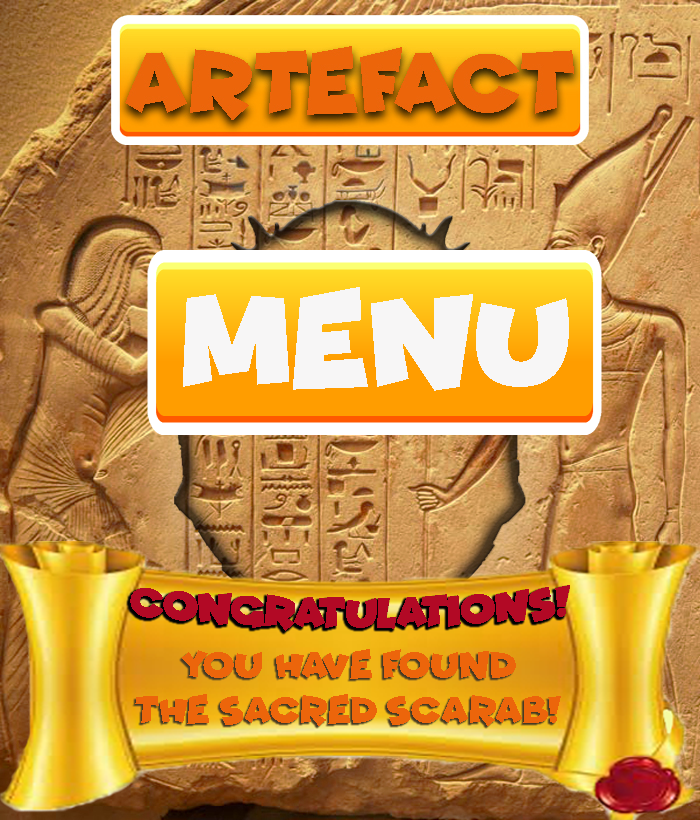
<style>
.page{position:relative;width:700px;height:820px}
.page>*{position:absolute;margin:0}
.t1{font:130px "Funhouse";color:#f7f6f6}
.t2{font:42px "Funhouse";color:#b20925}
.t3{font:38px "Funhouse";color:#ec650b}
</style>
<div class="page">
<p class="t1" style="left:183px;top:287px;width:386px;height:104px">Menu</p>
<p class="t2" style="left:130px;top:585px;width:440px;height:46px">congratulations!</p>
<p class="t3" style="left:135px;top:649px;width:426px;height:77px;text-align:center">you have found<br>the sacred scarab!</p>
</div>
